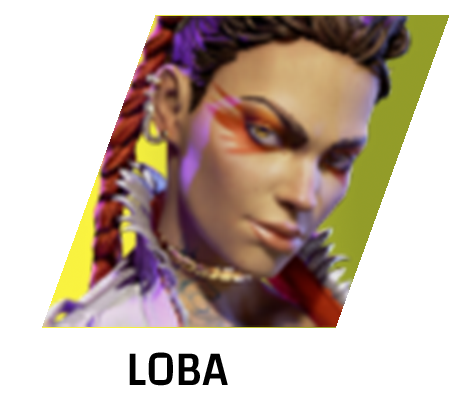
<style>
.page{position:relative;width:476px;height:408px;background:#ffffff}
.page>*{position:absolute;margin:0}
.t1{font:50px "Changa-Medium";color:#000000;scale:0.92 1}
</style>
<div class="page">
<p class="t1" style="left:129px;top:352px;width:99px;height:34px">LOBA</p>
</div>
